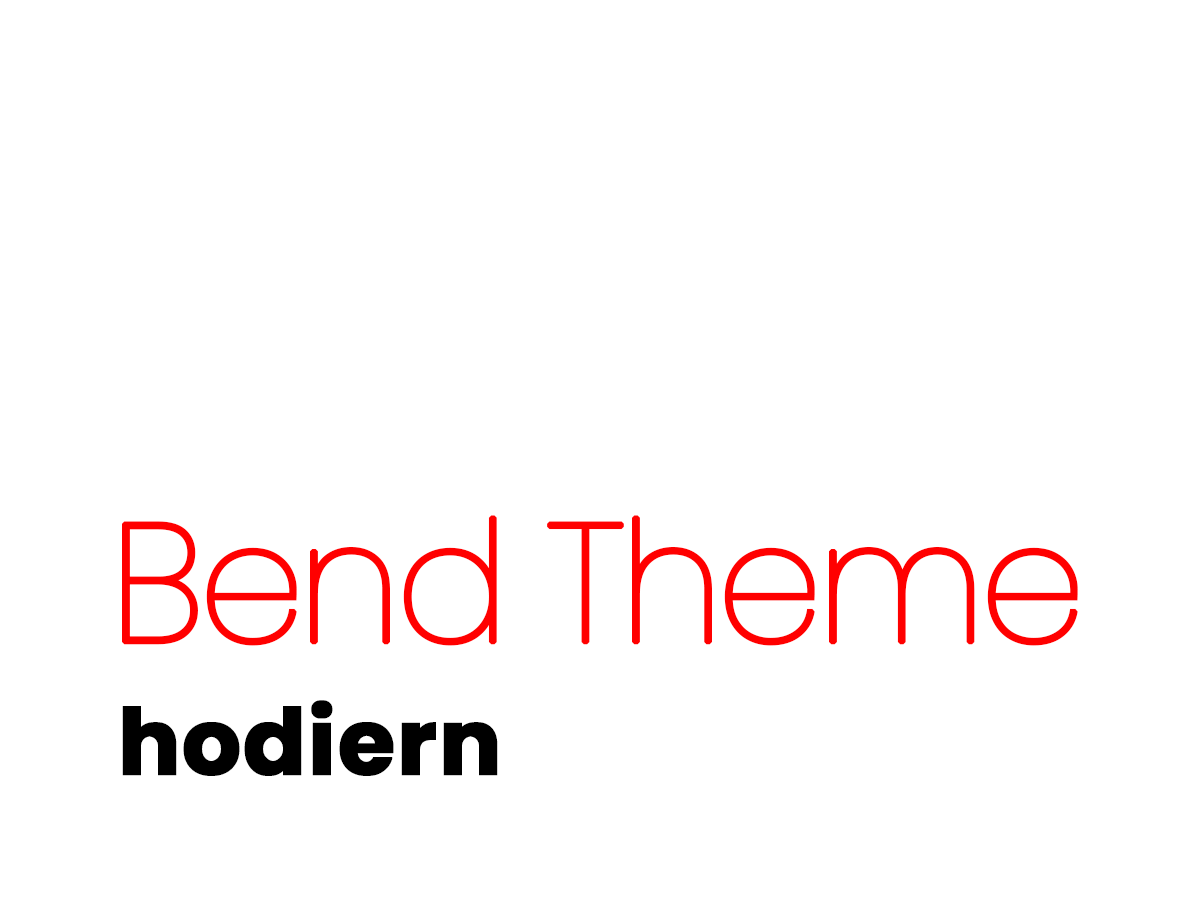
<style>
.page{position:relative;width:1200px;height:900px;background:#ffffff}
.page>*{position:absolute;margin:0}
.t1{font:168px "Poppins-Thin";letter-spacing:-0.06em;color:#ff0000;font-weight:bold}
.t2{font:92px "Poppins-Bold";color:#000000;font-weight:bold}
</style>
<div class="page">
<p class="t1" style="left:122px;top:515px;width:956px;height:131px">Bend Theme</p>
<p class="t2" style="left:122px;top:700px;width:376px;height:76px">hodiern</p>
</div>
